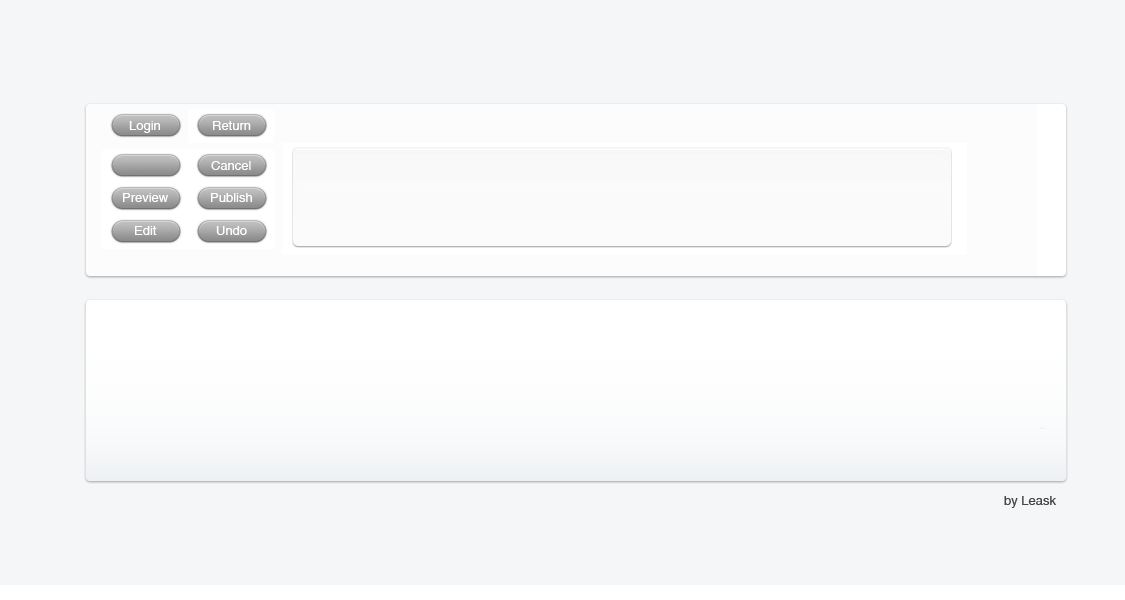
<style>
.page{position:relative;width:1125px;height:600px;background:#f5f6f7}
.page>*{position:absolute;margin:0}
.t1{font:13px "Helvetica";color:#ffffff}
.t2{font:13px "Helvetica";color:#464646}
</style>
<div class="page">
<p class="t1" style="left:129px;top:121px;width:31px;height:12px">Login</p>
<p class="t1" style="left:213px;top:121px;width:38px;height:9px">Return</p>
<p class="t1" style="left:211px;top:161px;width:40px;height:9px">Cancel</p>
<p class="t1" style="left:123px;top:193px;width:45px;height:9px">Preview</p>
<p class="t1" style="left:211px;top:193px;width:41px;height:9px">Publish</p>
<p class="t1" style="left:135px;top:226px;width:22px;height:9px">Edit</p>
<p class="t1" style="left:216px;top:226px;width:31px;height:9px">Undo</p>
<p class="t2" style="left:1004px;top:496px;width:52px;height:12px">by Leask</p>
</div>
